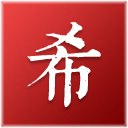
<style>
.page{position:relative;width:128px;height:128px}
.page>*{position:absolute;margin:0}
.t1{font:80px "TpldKhangXiDictDemo";color:#ffffff}
</style>
<div class="page">
<p class="t1" style="left:27px;top:22px;width:74px;height:86px">希</p>
</div>
